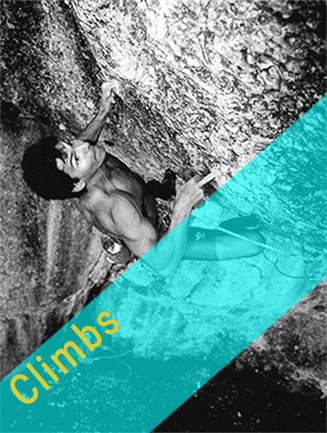
<style>
.page{position:relative;width:327px;height:433px}
.page>*{position:absolute;margin:0}
.t1{font:43.5px "Roboto-Medium";letter-spacing:0.075em;color:#d8ce2f;scale:0.85 1}
</style>
<div class="page">
<p class="t1" style="left:10px;top:311px;width:109px;height:93px;rotate:-40deg">Climbs</p>
</div>
